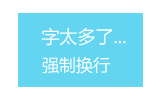
<style>
.page{position:relative;width:160px;height:100px;background:#64d5f1}
.page>*{position:absolute;margin:0}
.t1{font:18px "MicrosoftYaHei";color:#ffffff}
.t2{font:17px "MicrosoftYaHei";color:#ffffff}
</style>
<div class="page">
<p class="t1" style="left:41px;top:28px;width:85px;height:18px">字太多了...</p>
<p class="t2" style="left:42px;top:56px;width:68px;height:18px">强制换行</p>
</div>
